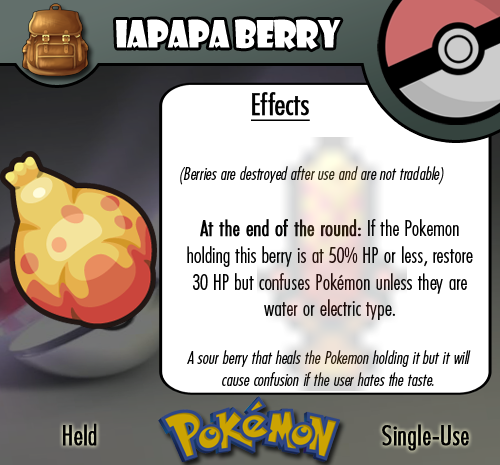
<style>
.page{position:relative;width:500px;height:465px;background:#ffffff}
.page>*{position:absolute;margin:0}
.t1{font:36.7px "ShowcardGothic-Reg";letter-spacing:-0.025em;color:#ffffff;scale:0.91 1}
.t2{font:22.2px "FuturaCondensedBQ-Light";color:#010101}
.t3{font:27.8px "FuturaCondensedBQ-Light";color:#010101;font-weight:bold}
.t4{font:30.6px "FuturaCondensedBQ-Light";color:#010101;font-weight:bold;text-decoration:underline}
.t5{font:18.1px "FuturaCondensedBQ-Light";color:#010101;font-style:italic}
.t6{font:22.2px "FuturaCondensedBQ-Light";color:#010101;font-weight:bold}
</style>
<div class="page">
<p class="t1" style="left:116px;top:19px;width:225px;height:31px">Iapapa Berry</p>
<p class="t2" style="left:180px;top:92px;width:293px;height:228px"><span class="t3">  </span><span class="t4">Effects<br><br><br></span><span class="t5">(Berries are destroyed after use and are not tradable)<br><br><br><br></span><span class="t6">At the end of the round:</span> If the Pokemon holding this berry is at 50% HP or less, restore 30 HP but confuses Pokémon unless they are water or electric type.</p>
<p class="t5" style="left:187px;top:350px;width:284px;height:36px;text-align:center">A sour berry that heals the Pokemon holding it but it will cause confusion if the user hates the taste.</p>
<p class="t3" style="left:63px;top:423px;width:34px;height:23px">Held</p>
<p class="t3" style="left:382px;top:424px;width:87px;height:27px">Single-Use</p>
</div>
